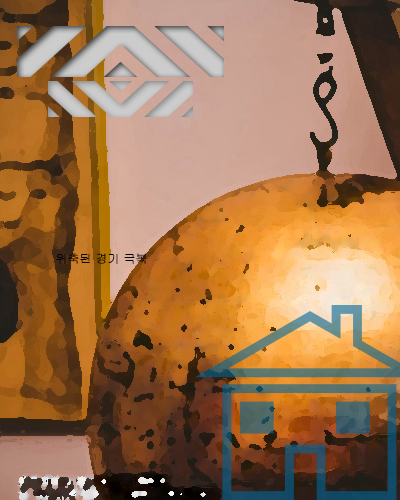
<style>
.page{position:relative;width:400px;height:500px}
.page>*{position:absolute;margin:0}
.t1{font:12px "Gulim";color:#000000}
</style>
<div class="page">
<p class="t1" style="left:56px;top:253px;width:91px;height:11px">위축된 경기 극복</p>
</div>
